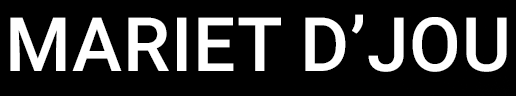
<style>
.page{position:relative;width:516px;height:96px;background:#000000}
.page>*{position:absolute;margin:0}
.t1{font:75px "Roboto-Medium";letter-spacing:0.01em;color:#ffffff;text-transform:uppercase}
</style>
<div class="page">
<p class="t1" style="left:10px;top:14px;width:497px;height:58px">mariet d’jou</p>
</div>
